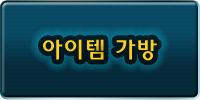
<style>
.page{position:relative;width:200px;height:100px}
.page>*{position:absolute;margin:0}
.t1{font:24px "2002L";letter-spacing:0.05em;color:#ffce21}
</style>
<div class="page">
<p class="t1" style="left:43px;top:39px;width:114px;height:22px">아이템 가방</p>
</div>
